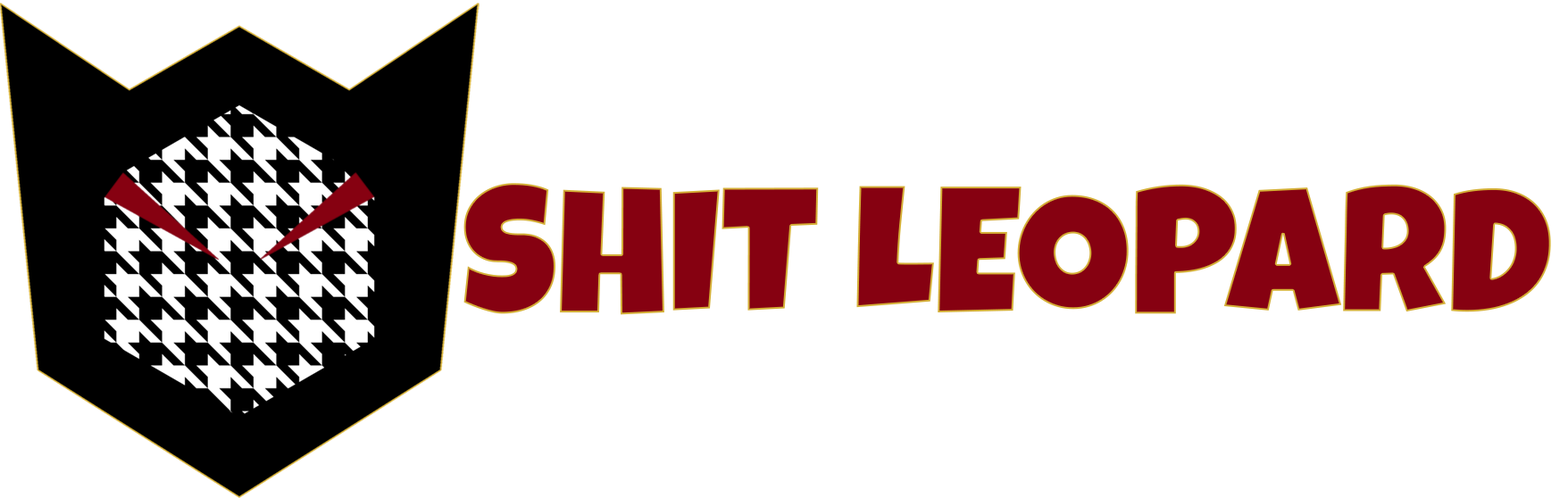
<style>
.page{position:relative;width:1568px;height:498px;background:#ffffff}
.page>*{position:absolute;margin:0}
.t1{font:178.6px "LuckiestGuy-Regular";color:#860111}
</style>
<div class="page">
<p class="t1" style="left:463px;top:183px;width:1088px;height:132px">SHIT LEOPARD</p>
</div>
